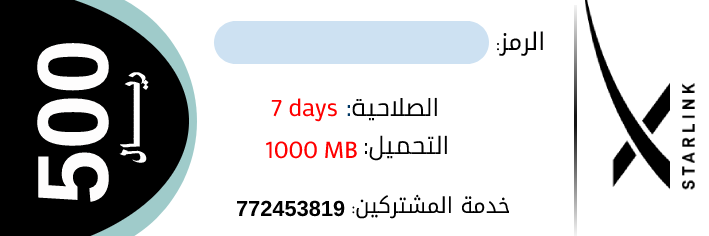
<style>
.page{position:relative;width:709px;height:236px;background:#ffffff}
.page>*{position:absolute;margin:0}
.t1{font:24.3px "DroidArabicKufi";color:#010000}
.t2{font:24.3px "AdobeArabic-Regular";color:#010000}
.t3{font:101.3px "Arial-BoldMT";color:#fefdfd}
.t4{font:33.8px "";color:#ffffff}
.t5{font:25px "Mako";color:#ff0000}
.t6{font:25.2px "Cairo-Regular";color:#000000}
.t7{font:25.2px "Cairo-Regular";color:#003764}
.t8{font:25.3px "Cairo-Regular";color:#000000}
.t9{font:25.9px "Mukta-Regular";color:#ff0000}
.t10{font:22px "DroidArabicKufi";color:#000000}
.t11{font:22px "AdobeArabic-Regular";color:#000000}
.t12{font:21.9px "Arial-BoldMT";color:#000000}
</style>
<div class="page">
<p class="t1" style="left:497px;top:31px;width:46px;height:25px">الرمز<span class="t2">:</span></p>
<p class="t3" style="left:37px;top:43px;width:72px;height:159px;rotate:-90deg">500</p>
<p class="t4" style="left:119px;top:72px;width:30px;height:91px;rotate:-90deg">ريــــــــــــال</p>
<p class="t5" style="left:271px;top:98px;width:66px;height:24px">7 days</p>
<p class="t6" style="left:347px;top:97px;width:90px;height:24px">الصلاحية<span class="t7">:</span></p>
<p class="t8" style="left:364px;top:135px;width:83px;height:26px">التحميل:</p>
<p class="t9" style="left:265px;top:141px;width:92px;height:18px">1000 MB</p>
<p class="t10" style="left:352px;top:194px;width:157px;height:25px">خدمة المشتركين<span class="t11">:</span></p>
<p class="t12" style="left:236px;top:200px;width:109px;height:17px">772453819</p>
</div>
